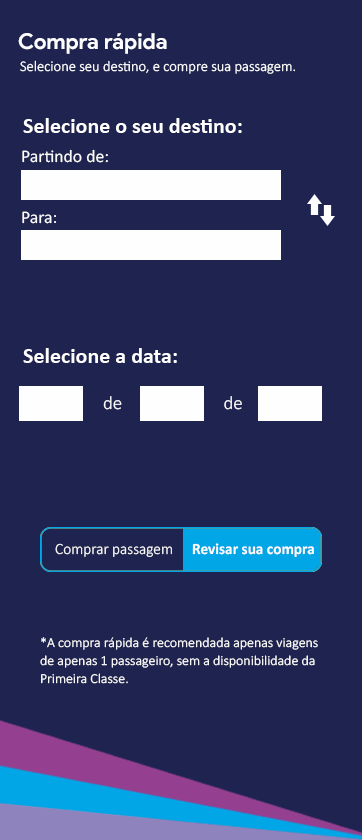
<style>
.page{position:relative;width:362px;height:840px;background:#1e234f}
.page>*{position:absolute;margin:0}
.t1{font:22px "ProductSans-Bold";color:#fefeff}
.t2{font:14.8px "Calibri-Light";color:#fefeff}
.t3{font:22px "Calibri-Bold";color:#fefeff}
.t4{font:17.7px "Calibri";color:#fefeff}
.t5{font:18.8px "Calibri-Light";color:#fefeff}
.t6{font:15.7px "Calibri-Light";color:#ffffff}
.t7{font:15.7px "Calibri-Bold";color:#ffffff}
.t8{font:13.8px/17.8px "Calibri-Light";color:#ffffff}
</style>
<div class="page">
<p class="t1" style="left:18px;top:33px;width:149px;height:21px">Compra rápida</p>
<p class="t2" style="left:20px;top:60px;width:275px;height:14px">Selecione seu destino, e compre sua passagem.</p>
<p class="t3" style="left:23px;top:118px;width:219px;height:15px">Selecione o seu destino:</p>
<p class="t4" style="left:22px;top:149px;width:86px;height:14px">Partindo de:</p>
<p class="t4" style="left:22px;top:211px;width:34px;height:13px">Para:</p>
<p class="t3" style="left:23px;top:348px;width:154px;height:15px">Selecione a data:</p>
<p class="t5" style="left:103px;top:396px;width:19px;height:14px">de</p>
<p class="t5" style="left:224px;top:396px;width:18px;height:14px">de</p>
<p class="t6" style="left:55px;top:543px;width:117px;height:14px">Comprar passagem</p>
<p class="t7" style="left:192px;top:543px;width:122px;height:14px">Revisar sua compra</p>
<p class="t8" style="left:40px;top:637px;width:278px;height:47px">*A compra rápida é recomendada apenas viagens<br>de apenas 1 passageiro, sem a disponibilidade da<br>Primeira Classe.</p>
</div>
